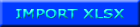
<style>
.page{position:relative;width:140px;height:27px;background:#003afe}
.page>*{position:absolute;margin:0}
.t1{font:12.8px "Verdana";font-weight:bold;scale:1.18 1}
</style>
<div class="page">
<p class="t1" style="left:16px;top:9px;width:108px;height:10px">IMPORT XLSX</p>
</div>
